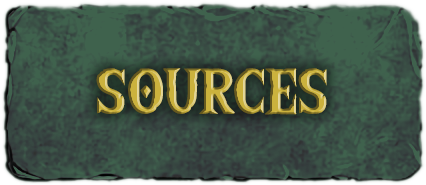
<style>
.page{position:relative;width:426px;height:185px}
.page>*{position:absolute;margin:0}
.t1{font:65px "TheWildBreathofZelda"}
</style>
<div class="page">
<p class="t1" style="left:96px;top:68px;width:231px;height:47px">SOURCES</p>
</div>
